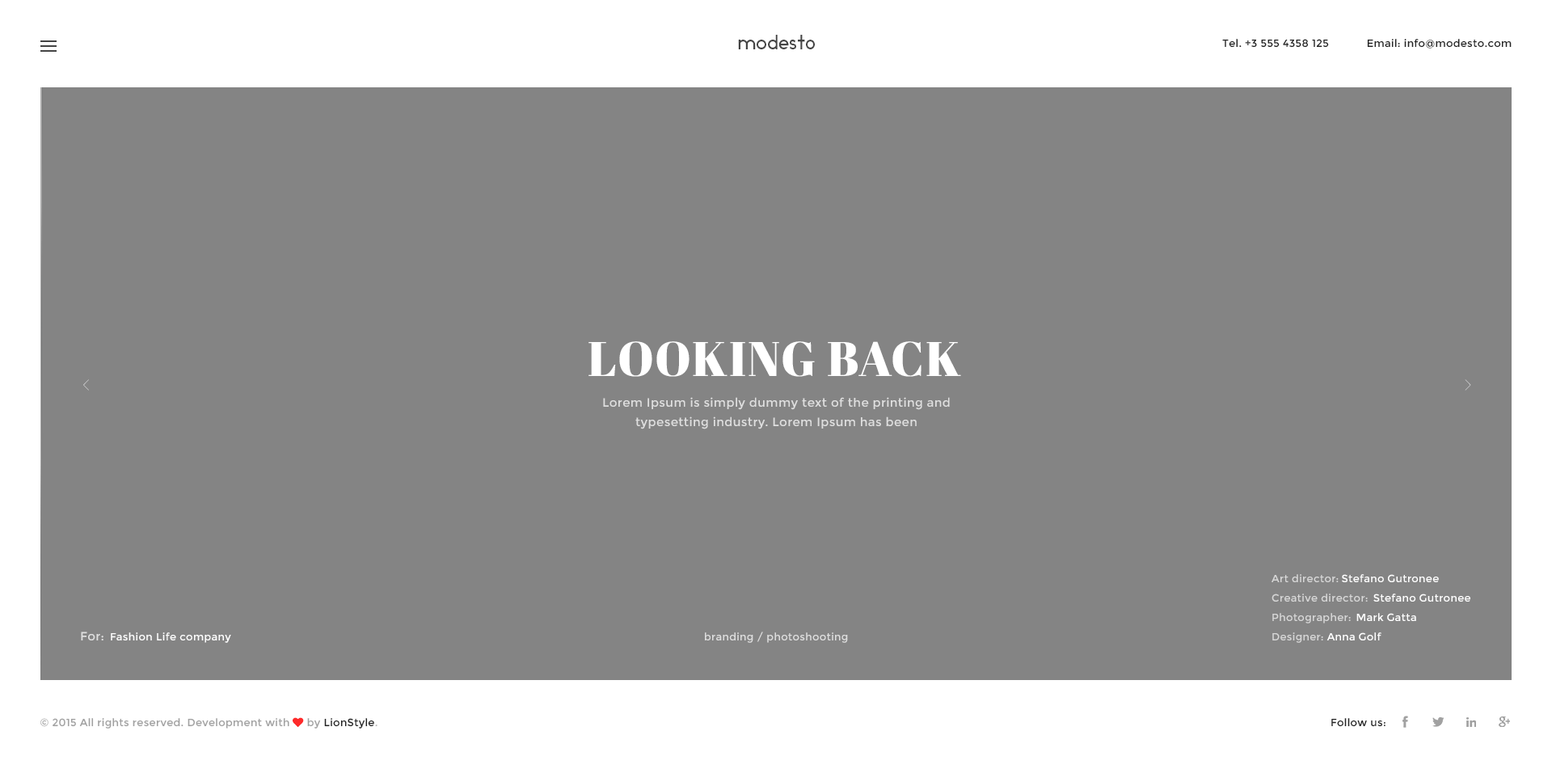
<style>
.page{position:relative;width:1552px;height:769px;background:#848484}
.page>*{position:absolute;margin:0}
.t1{font:19.4px "Ikaros";letter-spacing:0.025em;color:#444444}
.t2{font:10.5px "Montserrat-Regular";letter-spacing:0.025em;color:#222222;text-transform:uppercase}
.t3{font:10.5px "Montserrat-Regular";letter-spacing:0.025em;color:#222222}
.t4{font:48.5px "AbrilFatface-Regular";letter-spacing:0.025em;color:#ffffff;text-transform:uppercase}
.t5{font:35.6px "DecorCyrillic";scale:0.6 1}
.t6{font:35.6px "DecorCyrillic";letter-spacing:-0.05em;scale:0.59 1}
.t7{font:12.1px/19.4px "Montserrat-Regular";letter-spacing:0.025em;color:#dfdfdf}
.t8{font:10.5px/19.4px "Montserrat-Regular";letter-spacing:0.025em;color:#d7d7d7}
.t9{font:10.5px/19.4px "Montserrat-Regular";letter-spacing:0.025em;color:#ffffff}
.t10{font:10.5px/19.4px "FontAwesome";letter-spacing:0.025em;color:#f5f5f5}
.t11{font:12.1px "Montserrat-Regular";letter-spacing:0.025em;color:#dfdfdf}
.t12{font:10.6px "Montserrat-Regular";letter-spacing:0.025em;color:#ffffff}
.t13{font:12.1px "Montserrat-Regular";letter-spacing:0.025em;color:#a1a1a1}
.t14{font:10.5px "Montserrat-Regular";letter-spacing:0.025em;color:#dedede}
.t15{font:10.5px "Montserrat-Regular";letter-spacing:0.025em;color:#a1a1a1}
.t16{font:10.5px "FontAwesome";letter-spacing:0.025em;color:#fe2b2b}
.t17{font:10.5px "Montserrat-Regular";letter-spacing:0.025em;color:#b5b5b5}
</style>
<div class="page">
<p class="t1" style="left:738px;top:35px;width:77px;height:14px">modesto</p>
<p class="t2" style="left:1222px;top:39px;width:289px;height:9px"><span class="t3">Tel</span>. +3 555 4358 125            E<span class="t3">mail: info@modesto.com</span></p>
<p class="t4" style="left:588px;top:341px;width:373px;height:36px">Looking Back</p>
<p class="t5" style="left:83px;top:379px;width:6px;height:11px">&lt;</p>
<p class="t6" style="left:1464px;top:379px;width:7px;height:11px">&gt;</p>
<p class="t7" style="left:603px;top:397px;width:347px;height:32px;text-align:center">Lorem Ipsum is simply dummy text of the printing and typesetting industry. Lorem Ipsum has been</p>
<p class="t8" style="left:1271px;top:574px;width:96px;height:68px">Art director: <br>Creative director: <br>Photographer: <br>Designer:</p>
<p class="t9" style="left:1326px;top:574px;width:144px;height:66px"><span class="t10">                           </span>Stefano Gutronee<br>                                      Stefano Gutronee<br>                                Mark Gatta<br>                      Anna Golf</p>
<p class="t11" style="left:81px;top:631px;width:22px;height:9px">For:</p>
<p class="t12" style="left:111px;top:632px;width:120px;height:10px"><span class="t13">        </span>Fashion Life company</p>
<p class="t14" style="left:705px;top:631px;width:143px;height:11px">branding / photoshooting</p>
<p class="t15" style="left:40px;top:717px;width:337px;height:11px">© 2015 All rights reserved. Development with <span class="t16">♥ </span>by<span class="t3"> LionStyle</span><span class="t17">.</span></p>
<p class="t3" style="left:1331px;top:718px;width:54px;height:9px">Follow us:</p>
</div>
